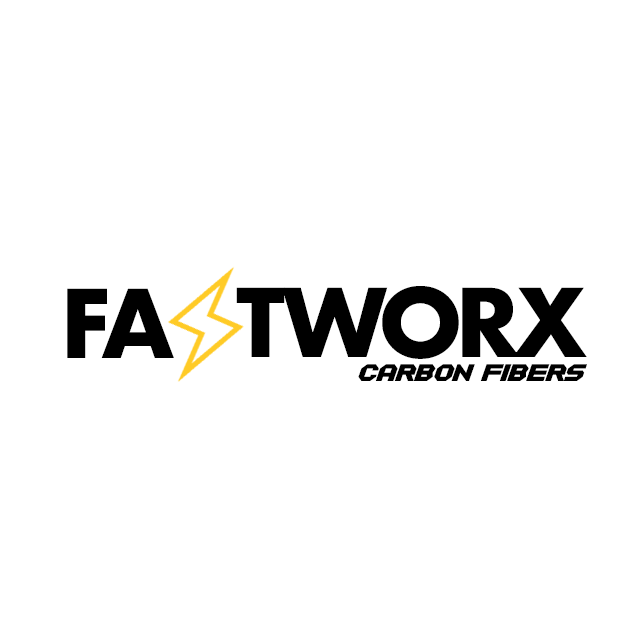
<style>
.page{position:relative;width:640px;height:640px;background:#ffffff}
.page>*{position:absolute;margin:0}
.t1{font:91.7px "Futura-Bold";letter-spacing:-0.075em;color:#000000}
.t2{font:91.7px "Futura-Bold";letter-spacing:-0.08em;color:#000000}
.t3{font:16.7px "Equalize";color:#000000}
</style>
<div class="page">
<p class="t1" style="left:67px;top:288px;width:107px;height:70px">FA</p>
<p class="t2" style="left:236px;top:286px;width:351px;height:73px">TWORX</p>
<p class="t3" style="left:358px;top:364px;width:229px;height:17px">CARBON FIBERS</p>
</div>
